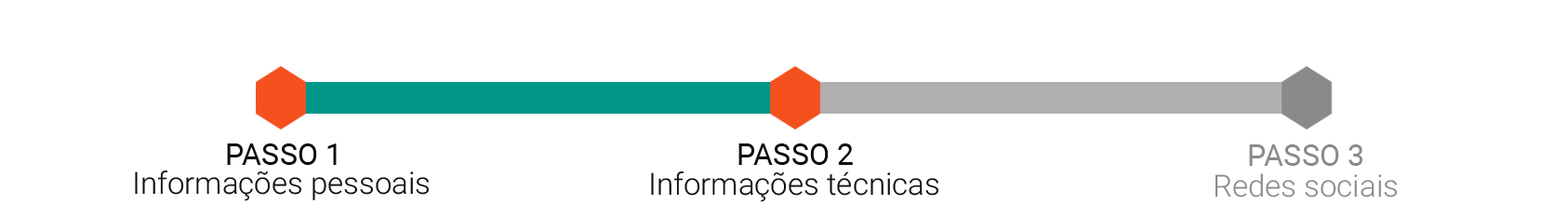
<style>
.page{position:relative;width:1568px;height:218px;background:#ffffff}
.page>*{position:absolute;margin:0}
.t1{font:30.5px "Roboto-Regular";color:#0e0e0e}
.t2{font:30.5px "Roboto-Regular";color:#8a8a8a}
.t3{font:30.5px "Roboto-Light";color:#0e0e0e}
.t4{font:30.5px "Roboto-Light";color:#8a8a8a}
</style>
<div class="page">
<p class="t1" style="left:227px;top:143px;width:110px;height:22px">PASSO 1</p>
<p class="t1" style="left:738px;top:143px;width:115px;height:22px">PASSO 2</p>
<p class="t2" style="left:1249px;top:144px;width:113px;height:22px">PASSO 3</p>
<p class="t3" style="left:135px;top:170px;width:295px;height:31px">Informações pessoais</p>
<p class="t3" style="left:651px;top:171px;width:288px;height:31px">Informações técnicas</p>
<p class="t4" style="left:1215px;top:173px;width:183px;height:24px">Redes sociais</p>
</div>
